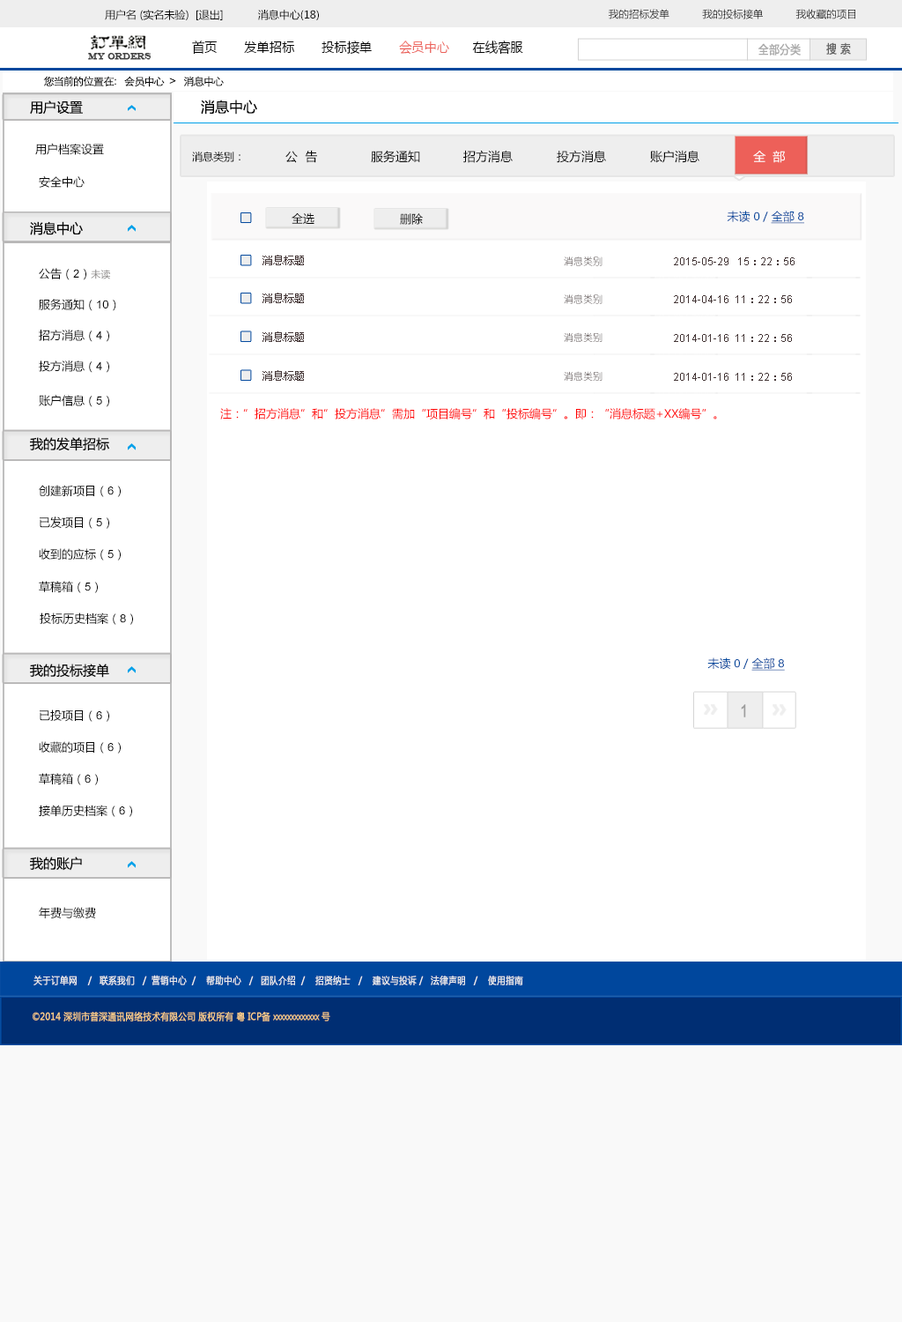
<style>
.page{position:relative;width:902px;height:1322px;background:#ffffff}
.page>*{position:absolute;margin:0}
.t1{font:10.6px "MicrosoftYaHei";color:#000000}
.t2{font:10.1px "MicrosoftYaHei";color:#000000}
.t3{font:13.6px "MicrosoftYaHei";color:#000000;font-variant:small-caps;scale:0.94 1}
.t4{font:13.6px "MicrosoftYaHei";color:#ed6059;font-variant:small-caps;scale:0.94 1}
.t5{font:8.7px "EngraversMT";color:#434343;font-variant:small-caps;font-weight:bold;scale:0.86 1}
.t6{font:11.6px "MicrosoftYaHei";color:#aaaaaa;font-variant:small-caps;font-weight:bold;scale:0.86 1}
.t7{font:11.6px "MicrosoftYaHei";color:#626262;font-variant:small-caps;font-weight:bold;scale:0.86 1}
.t8{font:10.6px "STXihei";color:#060606}
.t9{font:13.2px "MicrosoftYaHei";color:#060606}
.t10{font:14.1px "MicrosoftYaHei";color:#060606}
.t11{font:11.5px "MicrosoftYaHei";color:#060606}
.t12{font:12.3px "MicrosoftYaHei";color:#060606}
.t13{font:12.3px "MicrosoftYaHei";color:#ffffff}
.t14{font:11.5px "MicrosoftYaHei";color:#00479d}
.t15{font:11.5px "ArialMT";color:#00479d}
.t16{font:11.5px "MicrosoftYaHei";color:#00479d;text-decoration:underline}
.t17{font:11.5px "ArialMT";color:#00479d;text-decoration:underline}
.t18{font:10.6px "MicrosoftYaHei";color:#443636}
.t19{font:9.7px "YouYuan"}
.t20{font:10.6px "ArialMT";color:#443636}
.t21{font:11.5px "ArialMT";color:#060606}
.t22{font:9.7px "MicrosoftYaHei";color:#888584}
.t23{font:9.7px "YouYuan";color:#443636}
.t24{font:11.5px "MicrosoftYaHei";color:#ff0000}
.t25{font:17.6px "ArialMT";color:#9d9d9d;scale:0.82 1}
.t26{font:9.7px "MicrosoftYaHei";color:#eeeeee;font-variant:small-caps;font-weight:bold;scale:0.86 1}
.t27{font:13.6px "STXihei";color:#eeeeee;font-variant:small-caps;font-weight:bold;scale:0.86 1}
.t28{font:9.7px "MicrosoftYaHei";color:#facd89;font-variant:small-caps;font-weight:bold;scale:0.87 1}
.t29{font:9.7px "MicrosoftYaHei";color:#eeeeee;font-variant:small-caps;font-weight:bold;scale:0.87 1}
</style>
<div class="page">
<p class="t1" style="left:105px;top:10px;width:214px;height:10px">用户名 (实名未验)  [退出]           消息中心(18)</p>
<p class="t2" style="left:609px;top:9px;width:247px;height:10px">我的招标发单           我的投标接单           我收藏的项目</p>
<p class="t3" style="left:192px;top:41px;width:331px;height:14px">首页       发单招标       投标接单       <span class="t4">会员中心</span>      在线客服</p>
<p class="t5" style="left:88px;top:53px;width:64px;height:7px">MY ORDERS</p>
<p class="t6" style="left:759px;top:43px;width:42px;height:13px">全部分类</p>
<p class="t7" style="left:826px;top:42px;width:25px;height:13px">搜 索</p>
<p class="t8" style="left:43px;top:76px;width:181px;height:11px">您当前的位置在：  会员中心  &gt;   消息中心</p>
<p class="t9" style="left:30px;top:100px;width:53px;height:15px">用户设置</p>
<p class="t10" style="left:201px;top:100px;width:56px;height:15px">消息中心</p>
<p class="t11" style="left:35px;top:143px;width:69px;height:12px">用户档案设置</p>
<p class="t12" style="left:285px;top:150px;width:32px;height:13px">公  告</p>
<p class="t12" style="left:371px;top:150px;width:49px;height:13px">服务通知</p>
<p class="t12" style="left:463px;top:150px;width:50px;height:13px">招方消息</p>
<p class="t12" style="left:557px;top:150px;width:49px;height:13px">投方消息</p>
<p class="t12" style="left:650px;top:150px;width:50px;height:13px">账户消息</p>
<p class="t1" style="left:192px;top:152px;width:49px;height:10px">消息类别：</p>
<p class="t13" style="left:753px;top:151px;width:32px;height:12px">全  部</p>
<p class="t11" style="left:39px;top:176px;width:46px;height:12px">安全中心</p>
<p class="t9" style="left:30px;top:221px;width:53px;height:14px">消息中心</p>
<p class="t11" style="left:292px;top:212px;width:23px;height:13px">全选</p>
<p class="t11" style="left:400px;top:213px;width:23px;height:12px">删除</p>
<p class="t14" style="left:727px;top:211px;width:77px;height:13px">未读 <span class="t15">0 </span>/ <span class="t16">全部 </span><span class="t17">8</span></p>
<p class="t18" style="left:263px;top:255px;width:41px;height:10px">消息标题</p>
<p class="t19" style="left:564px;top:256px;width:39px;height:10px">消息类别</p>
<p class="t20" style="left:674px;top:257px;width:121px;height:8px">2015-05-29   15<span class="t18">：</span>22<span class="t18">：</span>56</p>
<p class="t11" style="left:39px;top:268px;width:71px;height:12px">公告（<span class="t21">2</span>）<span class="t22">未读</span></p>
<p class="t18" style="left:263px;top:293px;width:41px;height:10px">消息标题</p>
<p class="t11" style="left:39px;top:299px;width:77px;height:12px">服务通知（<span class="t21">10</span>）</p>
<p class="t19" style="left:564px;top:294px;width:39px;height:10px">消息类别</p>
<p class="t20" style="left:674px;top:295px;width:118px;height:8px">2014-04-16  11<span class="t18">：</span>22<span class="t18">：</span>56</p>
<p class="t11" style="left:39px;top:330px;width:70px;height:12px">招方消息（<span class="t21">4</span>）</p>
<p class="t18" style="left:263px;top:331px;width:41px;height:11px">消息标题</p>
<p class="t23" style="left:564px;top:332px;width:39px;height:10px">消息类别</p>
<p class="t20" style="left:674px;top:334px;width:118px;height:8px">2014-01-16  11<span class="t18">：</span>22<span class="t18">：</span>56</p>
<p class="t11" style="left:39px;top:360px;width:70px;height:13px">投方消息（<span class="t21">4</span>）</p>
<p class="t18" style="left:263px;top:370px;width:41px;height:11px">消息标题</p>
<p class="t23" style="left:564px;top:371px;width:39px;height:10px">消息类别</p>
<p class="t20" style="left:674px;top:373px;width:118px;height:8px">2014-01-16  11<span class="t18">：</span>22<span class="t18">：</span>56</p>
<p class="t11" style="left:39px;top:395px;width:70px;height:12px">账户信息（<span class="t21">5</span>）</p>
<p class="t24" style="left:220px;top:408px;width:497px;height:11px">注：”招方消息”和”投方消息”需加“项目编号”和“投标编号”。即：“消息标题+XX编号”。</p>
<p class="t9" style="left:30px;top:437px;width:79px;height:14px">我的发单招标</p>
<p class="t11" style="left:39px;top:485px;width:82px;height:12px">创建新项目（<span class="t21">6</span>）</p>
<p class="t11" style="left:40px;top:516px;width:69px;height:13px">已发项目（<span class="t21">5</span>）</p>
<p class="t11" style="left:39px;top:548px;width:82px;height:12px">收到的应标（<span class="t21">5</span>）</p>
<p class="t11" style="left:39px;top:581px;width:59px;height:12px">草稿箱（<span class="t21">5</span>）</p>
<p class="t11" style="left:40px;top:612px;width:93px;height:13px">投标历史档案（<span class="t21">8</span>）</p>
<p class="t9" style="left:30px;top:663px;width:79px;height:15px">我的投标接单</p>
<p class="t14" style="left:708px;top:657px;width:77px;height:14px">未读 <span class="t15">0 </span>/ <span class="t16">全部 </span><span class="t17">8</span></p>
<p class="t11" style="left:40px;top:709px;width:69px;height:13px">已投项目（<span class="t21">6</span>）</p>
<p class="t25" style="left:741px;top:704px;width:5px;height:13px">1</p>
<p class="t11" style="left:39px;top:741px;width:82px;height:12px">收藏的项目（<span class="t21">6</span>）</p>
<p class="t11" style="left:39px;top:773px;width:59px;height:12px">草稿箱（<span class="t21">6</span>）</p>
<p class="t11" style="left:39px;top:804px;width:93px;height:13px">接单历史档案（<span class="t21">6</span>）</p>
<p class="t9" style="left:30px;top:856px;width:52px;height:15px">我的账户</p>
<p class="t11" style="left:39px;top:907px;width:57px;height:11px">年费与缴费</p>
<p class="t26" style="left:33px;top:974px;width:490px;height:11px"><span class="t27"><br><br></span>关于订单网    /   联系我们   /  营销中心  /    帮助中心   /   团队介绍  /    招贤纳士   /    建议与投诉 /   法律声明   /    使用指南</p>
<p class="t28" style="left:33px;top:1011px;width:297px;height:10px"><span class="t29"> </span>©2014 深圳市普深通讯网络技术有限公司 版权所有 粤 ICP备 xxxxxxxxxxxxx 号</p>
</div>
